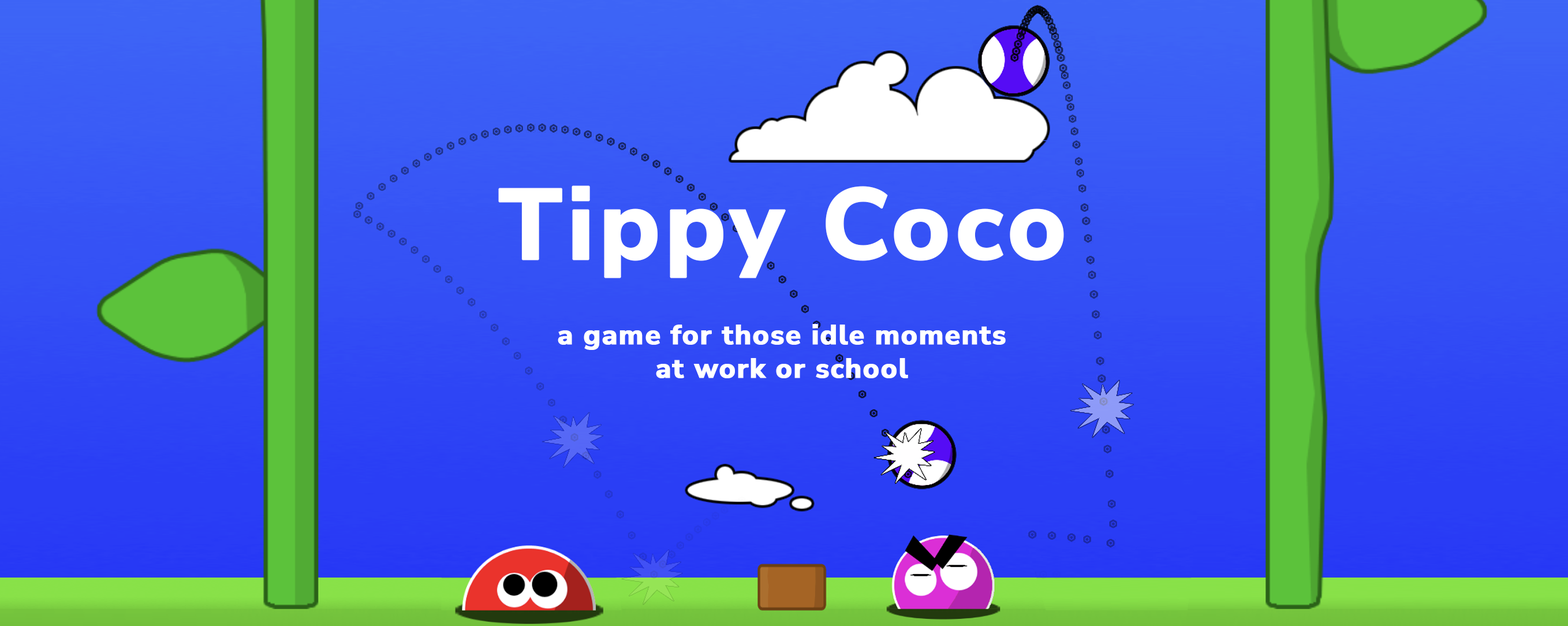
<style>
.page{position:relative;width:1568px;height:626px}
.page>*{position:absolute;margin:0}
.t1{font:99.9px "NunitoSans-ExtraBold";letter-spacing:0.025em;color:#ffffff;font-weight:bold}
.t2{font:27.7px "NunitoSans-ExtraBold";letter-spacing:0.025em;color:#ffffff;font-weight:bold}
</style>
<div class="page">
<p class="t1" style="left:498px;top:185px;width:566px;height:93px">Tippy Coco</p>
<p class="t2" style="left:558px;top:324px;width:448px;height:54px;text-align:center">a game for those idle moments<br>at work or school</p>
</div>
